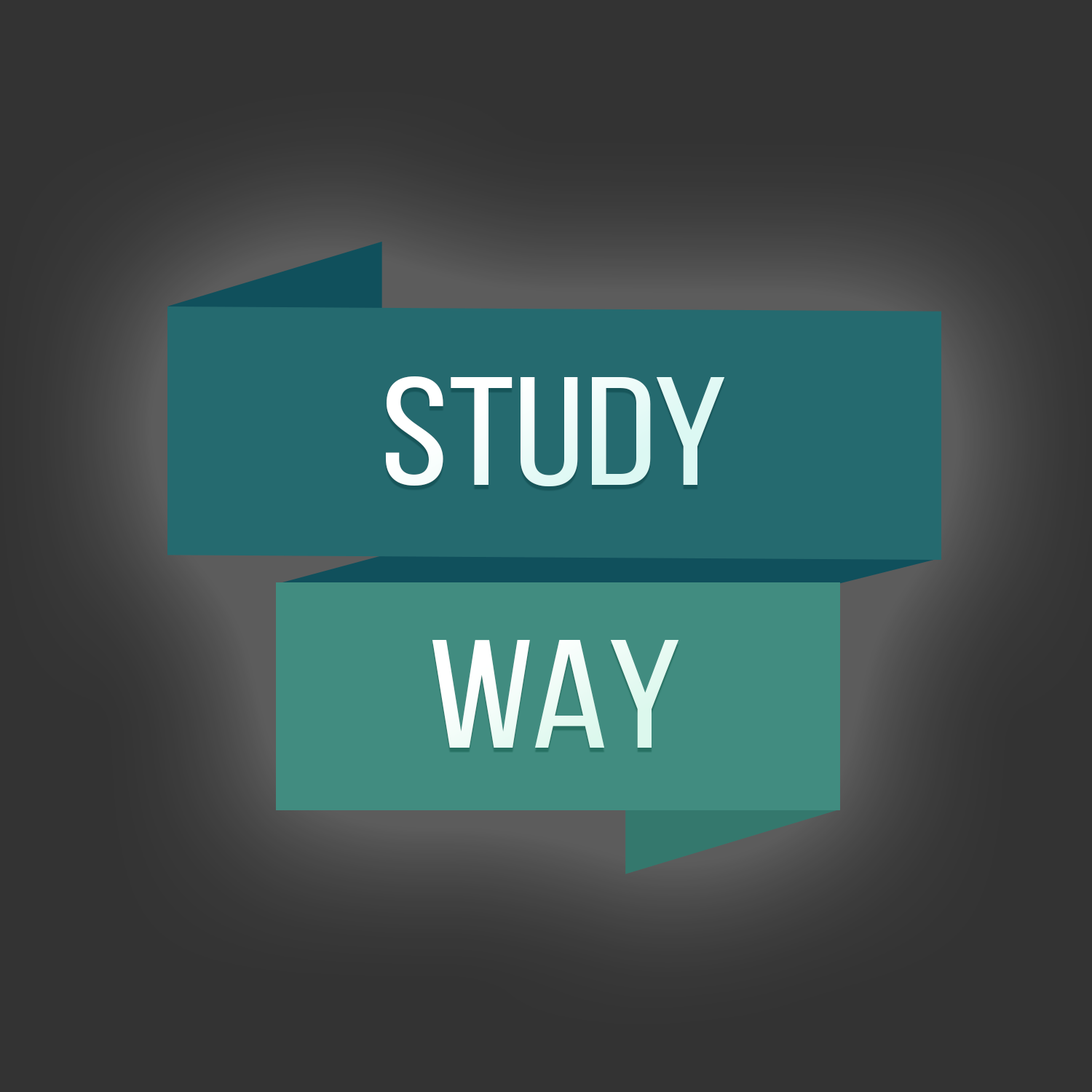
<style>
.page{position:relative;width:1092px;height:1092px;background:#333333}
.page>*{position:absolute;margin:0}
.t1{font:154.1px "BebasNeue-Regular";color:#ffffff;scale:1.18 1}
</style>
<div class="page">
<p class="t1" style="left:386px;top:376px;width:339px;height:110px">STUDY</p>
<p class="t1" style="left:432px;top:640px;width:247px;height:108px">WAY</p>
</div>
